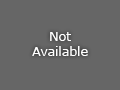
<style>
.page{position:relative;width:120px;height:90px;background:#666666}
.page>*{position:absolute;margin:0}
.t1{font:12.5px "Verdana";color:#ffffff}
</style>
<div class="page">
<p class="t1" style="left:32px;top:32px;width:56px;height:24px;text-align:center">Not<br>Available</p>
</div>
